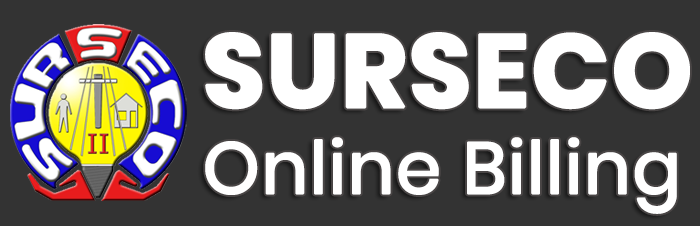
<style>
.page{position:relative;width:700px;height:226px;background:#333333}
.page>*{position:absolute;margin:0}
.t1{font:72px "Poppins-Regular";color:#ffffff;font-weight:bold}
.t2{font:102.4px "Poppins-Bold";color:#ffffff;font-weight:bold}
</style>
<div class="page">
<p class="t1" style="left:205px;top:32px;width:485px;height:182px"><span class="t2">SURSECO<br></span>Online Billing</p>
</div>
